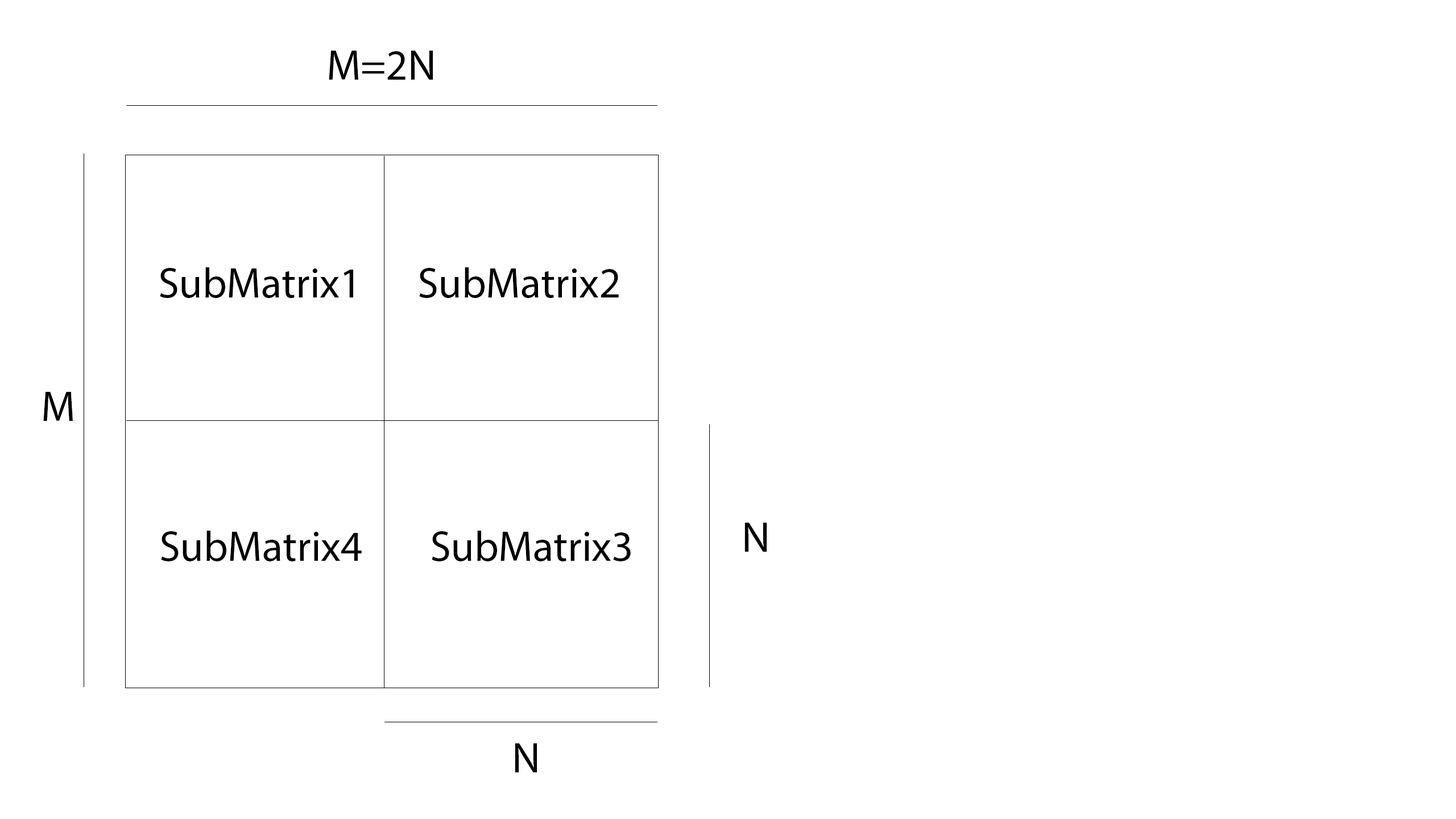
<style>
.page{position:relative;width:1456px;height:819px;background:#ffffff}
.page>*{position:absolute;margin:0}
.t1{font:42.7px "MyriadPro-Regular";color:#000000}
</style>
<div class="page">
<p class="t1" style="left:329px;top:51px;width:104px;height:29px">M=2N</p>
<p class="t1" style="left:160px;top:267px;width:193px;height:31px">SubMatrix1</p>
<p class="t1" style="left:419px;top:267px;width:200px;height:31px">SubMatrix2</p>
<p class="t1" style="left:43px;top:392px;width:30px;height:29px">M</p>
<p class="t1" style="left:161px;top:531px;width:201px;height:30px">SubMatrix4</p>
<p class="t1" style="left:432px;top:531px;width:199px;height:30px">SubMatrix3</p>
<p class="t1" style="left:744px;top:523px;width:23px;height:29px">N</p>
<p class="t1" style="left:515px;top:743px;width:22px;height:29px">N</p>
</div>
